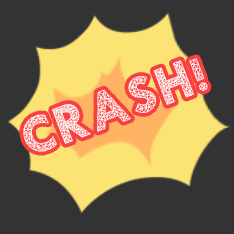
<style>
.page{position:relative;width:234px;height:234px;background:#333333}
.page>*{position:absolute;margin:0}
.t1{font:47.1px "Aroly";letter-spacing:-0.02em;color:#fefefe}
</style>
<div class="page">
<p class="t1" style="left:23px;top:58px;width:185px;height:94px;rotate:-21deg">CRASH!</p>
</div>
